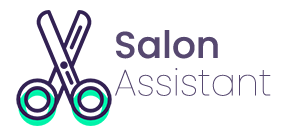
<style>
.page{position:relative;width:295px;height:126px;background:#ffffff}
.page>*{position:absolute;margin:0}
.t1{font:37.5px/37.5px "Poppins-Thin";color:#564870}
.t2{font:37.5px/37.5px "Poppins-Medium";color:#564870}
</style>
<div class="page">
<p class="t1" style="left:115px;top:30px;width:156px;height:66px"><span class="t2">Salon <br></span>Assistant</p>
</div>
